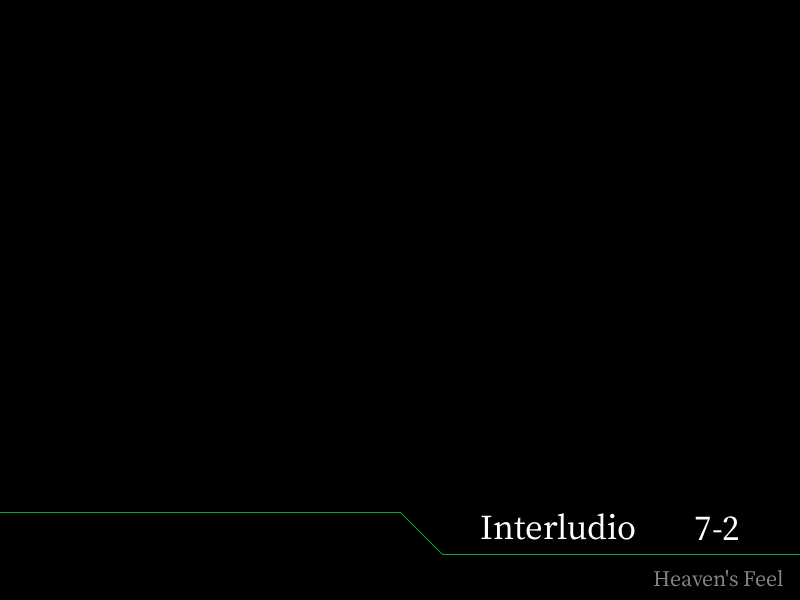
<style>
.page{position:relative;width:800px;height:600px;background:#000000}
.page>*{position:absolute;margin:0}
.t1{font:38px "OfficialFateFont-Medium";color:#ffffff}
.t2{font:24px "OfficialFateFont-Medium";color:#838383}
</style>
<div class="page">
<p class="t1" style="left:481px;top:513px;width:154px;height:27px">Interludio</p>
<p class="t1" style="left:695px;top:516px;width:43px;height:24px">7-2</p>
<p class="t2" style="left:653px;top:569px;width:130px;height:18px">Heaven's Feel</p>
</div>
